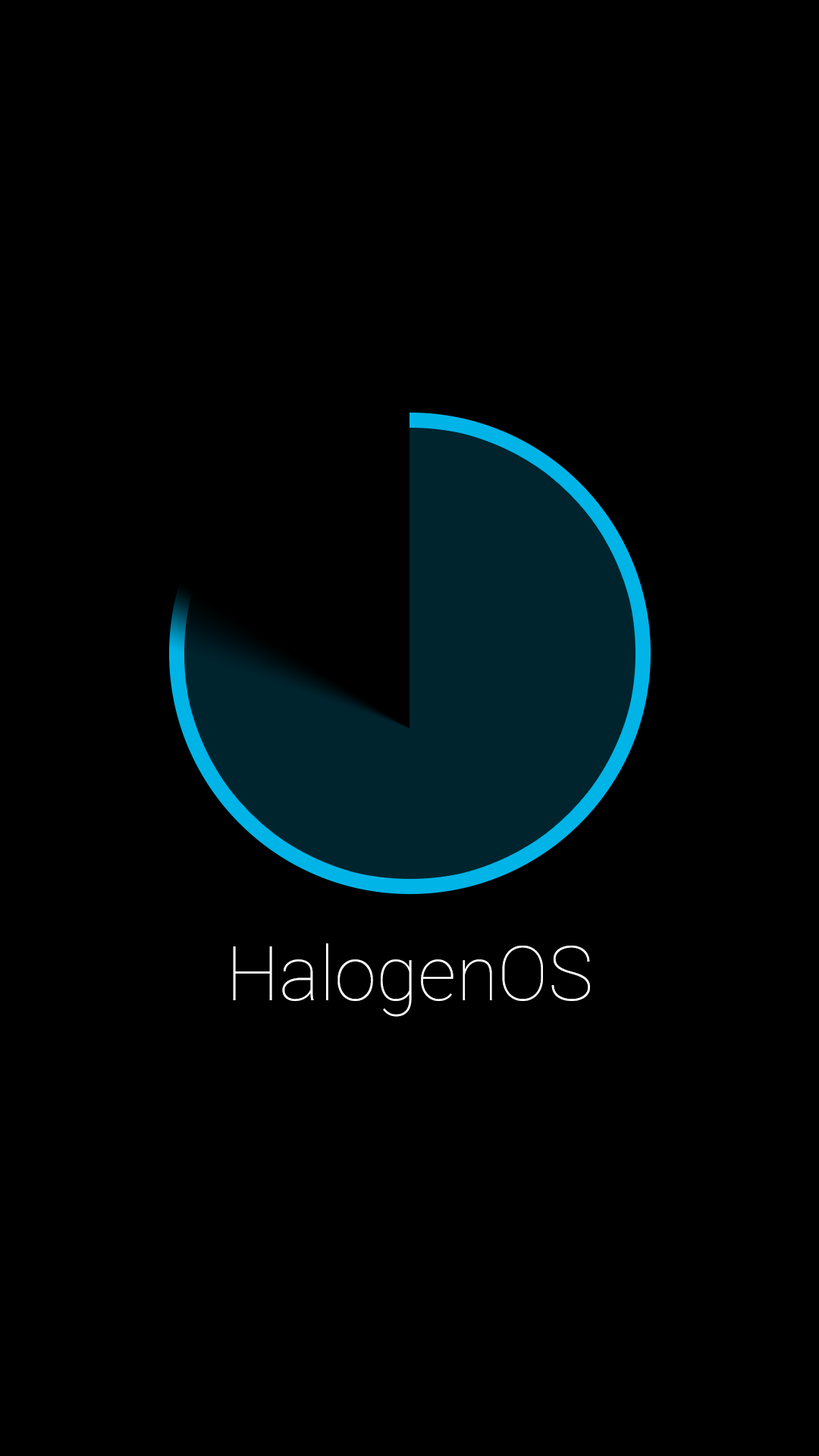
<style>
.page{position:relative;width:819px;height:1456px;background:#000000}
.page>*{position:absolute;margin:0}
.t1{font:75.8px "Roboto-Thin";color:#ffffff}
</style>
<div class="page">
<p class="t1" style="left:233px;top:943px;width:357px;height:74px">HalogenOS</p>
</div>
